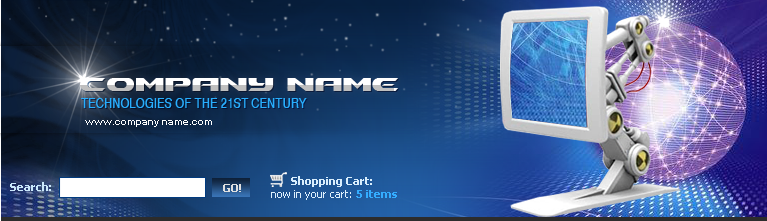
<style>
.page{position:relative;width:767px;height:221px}
.page>*{position:absolute;margin:0}
.t1{font:26px "Ben-Pioneer-Bold"}
.t2{font:14px "UltraVertex";color:#28aefd;text-transform:uppercase}
.t3{font:10px "Arial-BoldMT";color:#ffffff}
.t4{font:11px "Tahoma-Bold";color:#cbe8fc}
.t5{font:11px "Tahoma-Bold";color:#e0e0e0;text-transform:uppercase}
.t6{font:11px "Tahoma-Bold";color:#d9eefd}
.t7{font:11px "Tahoma";color:#ddf0fd}
.t8{font:11px "Tahoma-Bold";color:#34adff}
</style>
<div class="page">
<p class="t1" style="left:80px;top:78px;width:318px;height:13px">Company Name</p>
<p class="t2" style="left:81px;top:98px;width:226px;height:10px">Technologies of the 21st century</p>
<p class="t3" style="left:85px;top:120px;width:127px;height:7px">www.company name.com</p>
<p class="t4" style="left:10px;top:182px;width:41px;height:9px">Search:</p>
<p class="t5" style="left:223px;top:184px;width:18px;height:8px">GO!</p>
<p class="t6" style="left:291px;top:176px;width:81px;height:11px">Shopping Cart:</p>
<p class="t7" style="left:271px;top:190px;width:126px;height:10px">now in your cart: <span class="t8">5 items</span></p>
</div>
